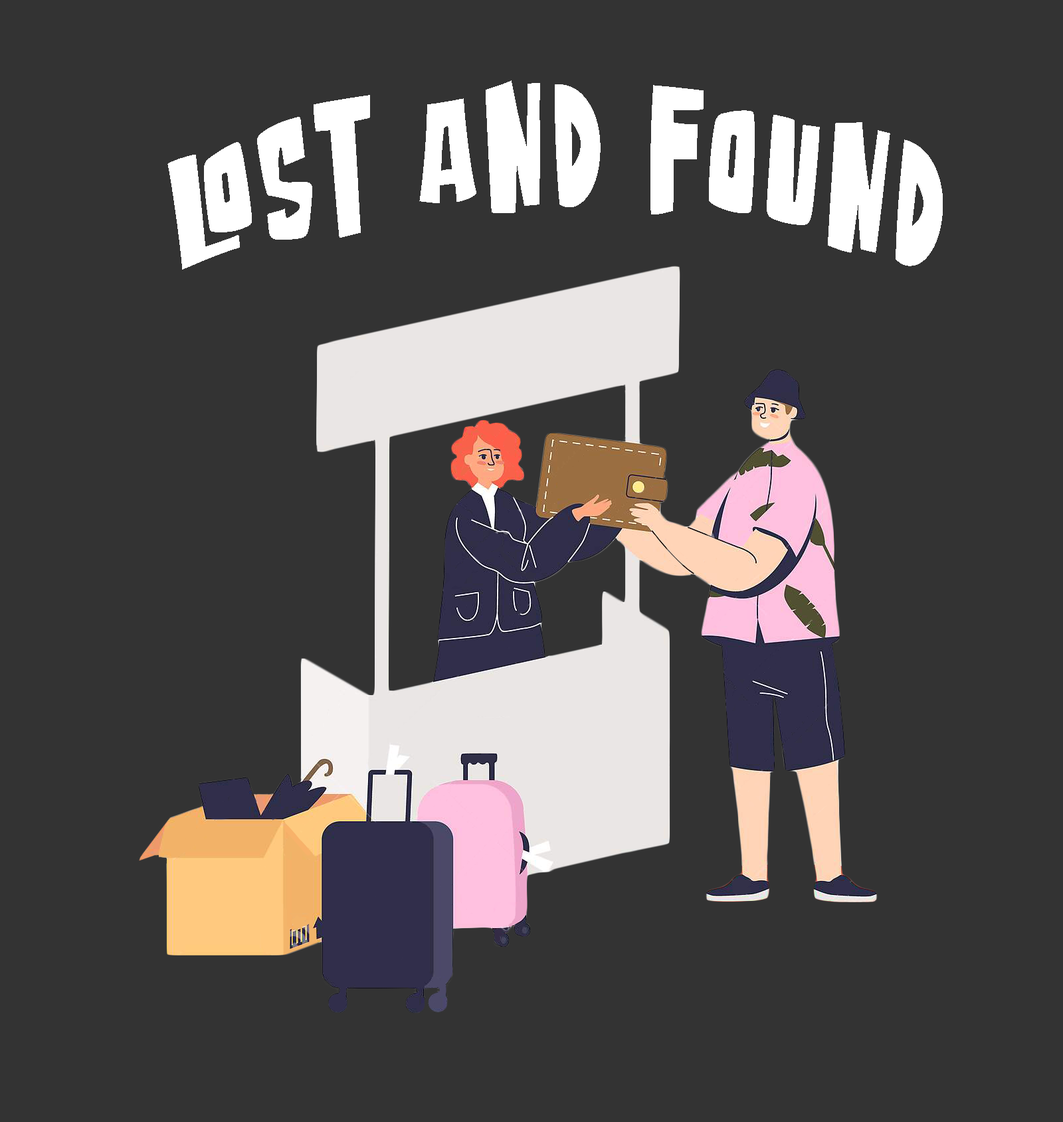
<style>
.page{position:relative;width:1063px;height:1122px;background:#333333}
.page>*{position:absolute;margin:0}
.t1{font:160.7px "AttackOfMonsterRegular";letter-spacing:0.08em;color:#ffffff;scale:0.59 1}
</style>
<div class="page">
<p class="t1" style="left:167px;top:80px;width:775px;height:190px">lost and found</p>
</div>
